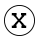
<style>
.page{position:relative;width:40px;height:40px;background:#ffffff}
.page>*{position:absolute;margin:0}
.t1{font:29.5px "Arvo";color:#010101}
</style>
<div class="page">
<p class="t1" style="left:11px;top:13px;width:16px;height:15px">x</p>
</div>
